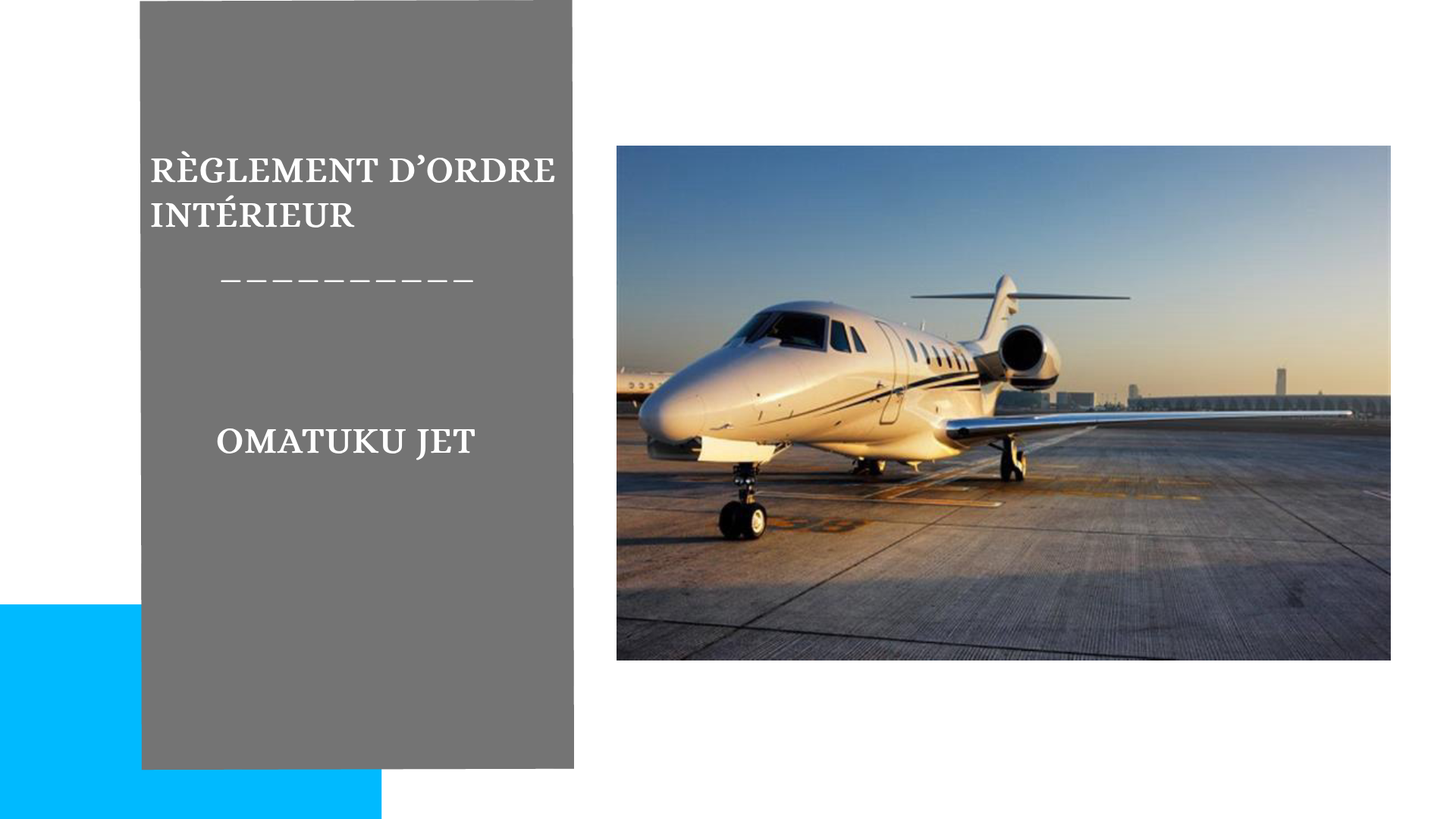
<style>
.page{position:relative;width:1456px;height:819px;background:#ffffff}
.page>*{position:absolute;margin:0}
.t1{font:37.2px "Alice-Regular";color:#ffffff;font-weight:bold}
</style>
<div class="page">
<p class="t1" style="left:151px;top:150px;width:404px;height:77px">RÈGLEMENT D’ORDRE<br>INTÉRIEUR</p>
<p class="t1" style="left:221px;top:280px;width:252px;height:3px">__________</p>
<p class="t1" style="left:217px;top:428px;width:258px;height:32px">OMATUKU JET</p>
</div>
